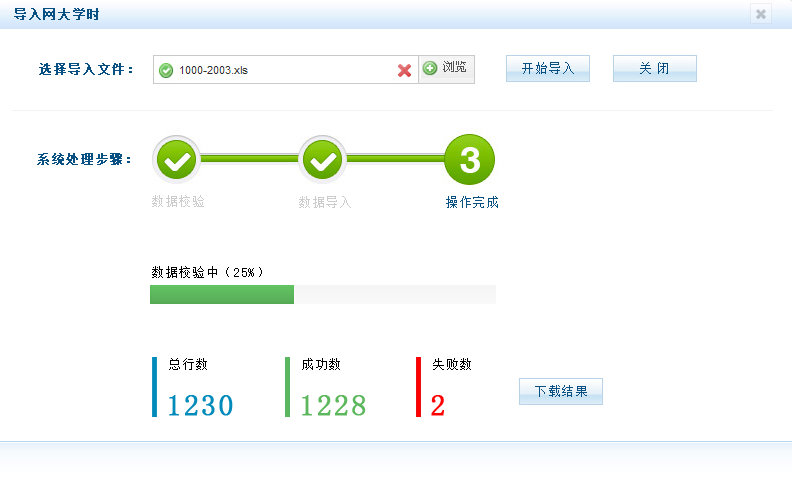
<style>
.page{position:relative;width:792px;height:495px;background:#ffffff}
.page>*{position:absolute;margin:0}
.t1{font:13px "SimSun";letter-spacing:0.05em;color:#085082;font-weight:bold}
.t2{font:13px "SimSun";letter-spacing:0.05em;color:#085082}
.t3{font:13px "SimSun";letter-spacing:0.05em;color:#cccccc}
.t4{font:13px "SimSun";letter-spacing:0.05em;color:#000000}
.t5{font:30px "SimSun";letter-spacing:0.05em;color:#018bba;font-weight:bold}
.t6{font:30px "SimSun";letter-spacing:0.05em;color:#5db75d;font-weight:bold}
.t7{font:30px "SimSun";letter-spacing:0.05em;color:#ff0000;font-weight:bold}
</style>
<div class="page">
<p class="t1" style="left:14px;top:8px;width:85px;height:12px">导入网大学时</p>
<p class="t1" style="left:39px;top:63px;width:93px;height:12px">选择导入文件：</p>
<p class="t2" style="left:522px;top:62px;width:52px;height:12px">开始导入</p>
<p class="t1" style="left:37px;top:153px;width:93px;height:12px">系统处理步骤：</p>
<p class="t3" style="left:152px;top:195px;width:52px;height:12px">数据校验</p>
<p class="t3" style="left:299px;top:196px;width:52px;height:12px">数据导入</p>
<p class="t2" style="left:446px;top:196px;width:52px;height:12px">操作完成</p>
<p class="t4" style="left:152px;top:266px;width:110px;height:12px">数据校验中（25%）</p>
<p class="t4" style="left:169px;top:358px;width:38px;height:12px">总行数</p>
<p class="t4" style="left:302px;top:358px;width:38px;height:12px">成功数</p>
<p class="t4" style="left:433px;top:358px;width:38px;height:12px">失败数</p>
<p class="t2" style="left:535px;top:385px;width:52px;height:12px">下载结果</p>
<p class="t5" style="left:169px;top:395px;width:64px;height:21px">1230</p>
<p class="t6" style="left:302px;top:395px;width:64px;height:21px">1228</p>
<p class="t7" style="left:431px;top:395px;width:13px;height:21px">2</p>
</div>
